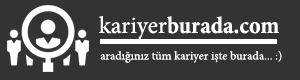
<style>
.page{position:relative;width:300px;height:80px;background:#333333}
.page>*{position:absolute;margin:0}
.t1{font:24px "MinionPro-BoldCn";color:#ffffff}
.t2{font:24px "MinionPro-Medium";color:#ffffff}
.t3{font:12px "MinionPro-Medium";color:#ffffff}
</style>
<div class="page">
<p class="t1" style="left:99px;top:15px;width:180px;height:25px"><span class="t2">kariyer</span>burada.com</p>
<p class="t3" style="left:100px;top:51px;width:182px;height:12px">aradığınız tüm kariyer işte burada... :)</p>
</div>
